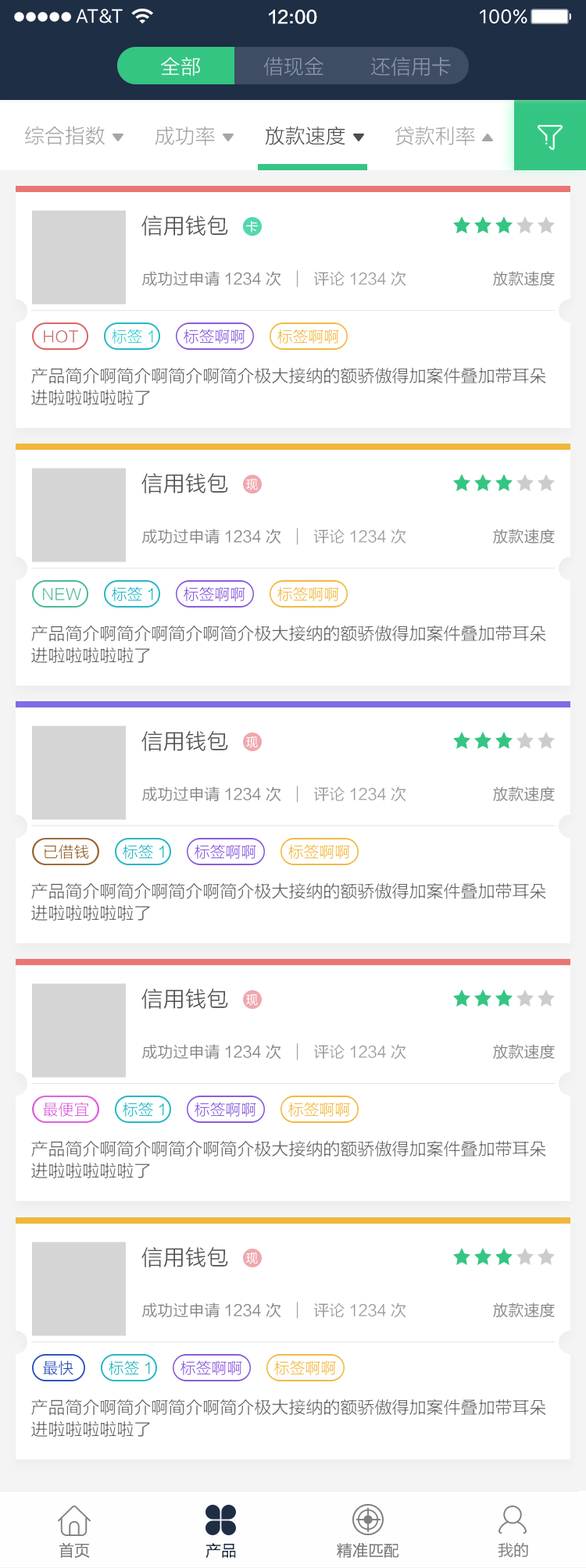
<style>
.page{position:relative;width:586px;height:1568px;background:#ffffff}
.page>*{position:absolute;margin:0}
.t1{font:17.2px "FZLTZHK--GBK1-0";color:#ffffff}
.t2{font:20.3px "FZLTXHK";color:#ffffff}
.t3{font:20.3px "FZLTXHK";color:#8895a8}
.t4{font:20.3px "FZLTXHK";color:#a6a6a6}
.t5{font:20.3px "FZLTXHK";color:#4d4d4d}
.t6{font:21.9px "FZLTXHK";color:#4d4d4d}
.t7{font:12.5px "FZLTXHK";color:#ffffff}
.t8{font:15.6px "FZLTXHK";color:#808080}
.t9{font:15.6px "FZLTXHK";color:#999999}
.t10{font:15.6px "FZLTXHK";color:#33cccc}
.t11{font:15.6px "FZLTXHK";color:#8857db}
.t12{font:15.6px "FZLTXHK";color:#f1b73c}
.t13{font:15.6px "FZLTXHK";color:#cc6666}
.t14{font:17.2px/21.9px "FZLTXHK";color:#666666}
.t15{font:15.6px "FZLTXHK";color:#45b991}
.t16{font:15.6px "FZLTXHK";color:#21b5c3}
.t17{font:15.6px "FZLTXHK";color:#996633}
.t18{font:15.6px "FZLTXHK";color:#db5edc}
.t19{font:15.6px "FZLTXHK";color:#294fbb}
.t20{font:15.6px "FZLTXHK";color:#1e2e45}
.t21{font:15.6px "FZLTHK--GBK1-0";color:#808080}
</style>
<div class="page">
<p class="t1" style="left:269px;top:9px;width:48px;height:15px">12:00</p>
<p class="t2" style="left:161px;top:57px;width:39px;height:19px">全部</p>
<p class="t3" style="left:263px;top:57px;width:60px;height:19px">借现金</p>
<p class="t3" style="left:371px;top:57px;width:80px;height:19px">还信用卡</p>
<p class="t4" style="left:25px;top:126px;width:80px;height:19px">综合指数</p>
<p class="t4" style="left:155px;top:126px;width:60px;height:20px">成功率</p>
<p class="t5" style="left:265px;top:126px;width:80px;height:19px">放款速度</p>
<p class="t4" style="left:394px;top:126px;width:81px;height:20px">贷款利率</p>
<p class="t6" style="left:141px;top:216px;width:87px;height:20px">信用钱包</p>
<p class="t7" style="left:246px;top:220px;width:12px;height:13px">卡</p>
<p class="t8" style="left:142px;top:271px;width:139px;height:16px">成功过申请1234次</p>
<p class="t9" style="left:313px;top:271px;width:93px;height:15px">评论1234次</p>
<p class="t8" style="left:493px;top:271px;width:61px;height:15px">放款速度</p>
<p class="t10" style="left:112px;top:329px;width:41px;height:15px">标签1</p>
<p class="t11" style="left:184px;top:329px;width:61px;height:15px">标签啊啊</p>
<p class="t12" style="left:277px;top:329px;width:62px;height:15px">标签啊啊</p>
<p class="t13" style="left:44px;top:330px;width:35px;height:13px">HOT</p>
<p class="t14" style="left:31px;top:367px;width:515px;height:38px">产品简介啊简介啊简介啊简介极大接纳的额骄傲得加案件叠加带耳朵<br>进啦啦啦啦啦了</p>
<p class="t6" style="left:141px;top:473px;width:87px;height:21px">信用钱包</p>
<p class="t7" style="left:246px;top:479px;width:12px;height:11px">现</p>
<p class="t8" style="left:142px;top:529px;width:139px;height:15px">成功过申请1234次</p>
<p class="t9" style="left:313px;top:529px;width:93px;height:14px">评论1234次</p>
<p class="t8" style="left:493px;top:529px;width:61px;height:14px">放款速度</p>
<p class="t15" style="left:43px;top:588px;width:38px;height:12px">NEW</p>
<p class="t16" style="left:112px;top:586px;width:41px;height:15px">标签1</p>
<p class="t11" style="left:184px;top:586px;width:61px;height:15px">标签啊啊</p>
<p class="t12" style="left:277px;top:586px;width:62px;height:15px">标签啊啊</p>
<p class="t14" style="left:31px;top:625px;width:515px;height:38px">产品简介啊简介啊简介啊简介极大接纳的额骄傲得加案件叠加带耳朵<br>进啦啦啦啦啦了</p>
<p class="t6" style="left:141px;top:731px;width:87px;height:20px">信用钱包</p>
<p class="t7" style="left:246px;top:736px;width:12px;height:12px">现</p>
<p class="t8" style="left:142px;top:786px;width:139px;height:16px">成功过申请1234次</p>
<p class="t9" style="left:313px;top:786px;width:93px;height:15px">评论1234次</p>
<p class="t8" style="left:493px;top:786px;width:61px;height:15px">放款速度</p>
<p class="t17" style="left:44px;top:844px;width:45px;height:15px">已借钱</p>
<p class="t16" style="left:123px;top:844px;width:41px;height:15px">标签1</p>
<p class="t11" style="left:194px;top:844px;width:62px;height:15px">标签啊啊</p>
<p class="t12" style="left:288px;top:844px;width:62px;height:15px">标签啊啊</p>
<p class="t14" style="left:31px;top:882px;width:515px;height:39px">产品简介啊简介啊简介啊简介极大接纳的额骄傲得加案件叠加带耳朵<br>进啦啦啦啦啦了</p>
<p class="t6" style="left:141px;top:989px;width:87px;height:20px">信用钱包</p>
<p class="t7" style="left:246px;top:994px;width:12px;height:12px">现</p>
<p class="t8" style="left:142px;top:1044px;width:139px;height:16px">成功过申请1234次</p>
<p class="t9" style="left:313px;top:1044px;width:93px;height:15px">评论1234次</p>
<p class="t8" style="left:493px;top:1044px;width:61px;height:15px">放款速度</p>
<p class="t18" style="left:43px;top:1102px;width:46px;height:15px">最便宜</p>
<p class="t16" style="left:123px;top:1102px;width:41px;height:15px">标签1</p>
<p class="t11" style="left:194px;top:1102px;width:62px;height:15px">标签啊啊</p>
<p class="t12" style="left:288px;top:1102px;width:62px;height:15px">标签啊啊</p>
<p class="t14" style="left:31px;top:1140px;width:515px;height:38px">产品简介啊简介啊简介啊简介极大接纳的额骄傲得加案件叠加带耳朵<br>进啦啦啦啦啦了</p>
<p class="t6" style="left:141px;top:1247px;width:87px;height:20px">信用钱包</p>
<p class="t7" style="left:246px;top:1253px;width:12px;height:11px">现</p>
<p class="t8" style="left:142px;top:1303px;width:139px;height:15px">成功过申请1234次</p>
<p class="t9" style="left:313px;top:1303px;width:93px;height:14px">评论1234次</p>
<p class="t8" style="left:493px;top:1303px;width:61px;height:14px">放款速度</p>
<p class="t19" style="left:43px;top:1360px;width:30px;height:15px">最快</p>
<p class="t16" style="left:109px;top:1360px;width:41px;height:15px">标签1</p>
<p class="t11" style="left:180px;top:1360px;width:62px;height:15px">标签啊啊</p>
<p class="t12" style="left:274px;top:1360px;width:62px;height:15px">标签啊啊</p>
<p class="t14" style="left:31px;top:1399px;width:515px;height:38px">产品简介啊简介啊简介啊简介极大接纳的额骄傲得加案件叠加带耳朵<br>进啦啦啦啦啦了</p>
<p class="t8" style="left:59px;top:1542px;width:31px;height:16px">首页</p>
<p class="t20" style="left:205px;top:1543px;width:31px;height:15px">产品</p>
<p class="t8" style="left:337px;top:1543px;width:62px;height:15px">精准匹配</p>
<p class="t21" style="left:497px;top:1542px;width:31px;height:16px">我的</p>
</div>
